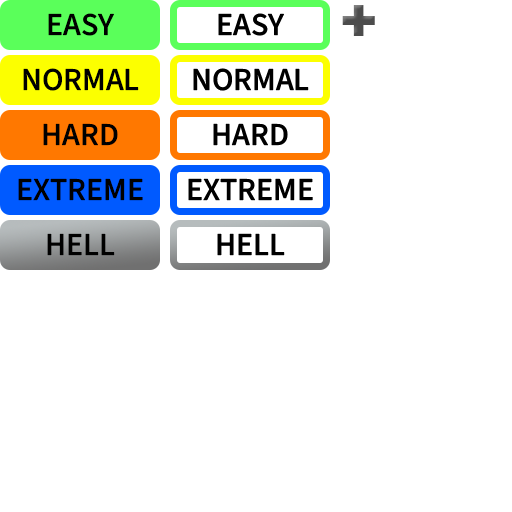
<style>
.page{position:relative;width:512px;height:512px;background:#ffffff}
.page>*{position:absolute;margin:0}
.t1{font:60px "Arial-Black";color:#4c4c4c}
.t2{font:32px "SourceSansRoman_550.000wght";color:#000000}
</style>
<div class="page">
<p class="t1" style="left:342px;top:5px;width:33px;height:31px">+</p>
<p class="t2" style="left:48px;top:13px;width:66px;height:23px">EASY</p>
<p class="t2" style="left:218px;top:13px;width:66px;height:23px">EASY</p>
<p class="t2" style="left:23px;top:68px;width:116px;height:23px">NORMAL</p>
<p class="t2" style="left:193px;top:68px;width:116px;height:23px">NORMAL</p>
<p class="t2" style="left:43px;top:123px;width:75px;height:23px">HARD</p>
<p class="t2" style="left:213px;top:123px;width:75px;height:23px">HARD</p>
<p class="t2" style="left:18px;top:178px;width:125px;height:23px">EXTREME</p>
<p class="t2" style="left:188px;top:178px;width:125px;height:23px">EXTREME</p>
<p class="t2" style="left:47px;top:233px;width:68px;height:23px">HELL</p>
<p class="t2" style="left:217px;top:233px;width:68px;height:23px">HELL</p>
</div>
